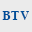
<style>
.page{position:relative;width:32px;height:32px;background:#ebebeb}
.page>*{position:absolute;margin:0}
.t1{font:12.3px "Times-Bold";letter-spacing:0.065em;color:#004e98}
</style>
<div class="page">
<p class="t1" style="left:2px;top:11px;width:27px;height:9px">BTV</p>
</div>
